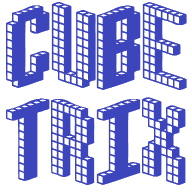
<style>
.page{position:relative;width:192px;height:192px;background:#ffffff}
.page>*{position:absolute;margin:0}
.t1{font:92px "Blox-(BRK";color:#3c45bc}
.t2{font:92px/95px "Blox-(BRK";color:#3c45bc}
</style>
<div class="page">
<p class="t1" style="left:6px;top:2px;width:181px;height:183px">cUbE<br><span class="t2">tRiX</span></p>
</div>
